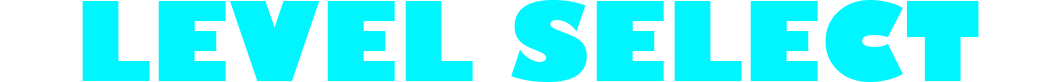
<style>
.page{position:relative;width:1054px;height:82px;background:#00f6ff}
.page>*{position:absolute;margin:0}
.t1{font:108.3px "GillSans-UltraBold";color:#00f6ff}
</style>
<div class="page">
<p class="t1" style="left:82px;top:0px;width:897px;height:82px">LEVEL SELECT</p>
</div>
